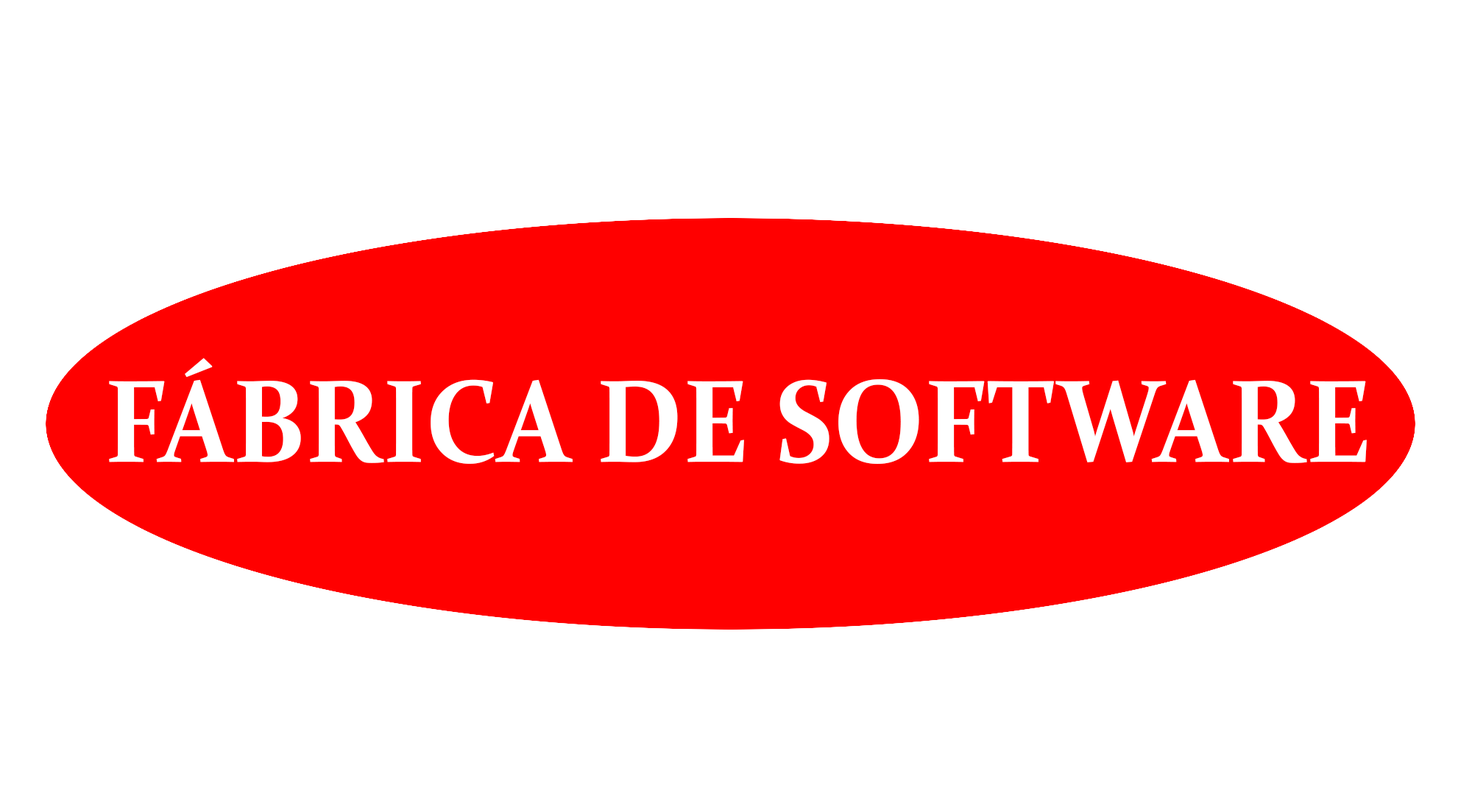
<style>
.page{position:relative;width:1472px;height:810px;background:#ffffff}
.page>*{position:absolute;margin:0}
.t1{font:117.7px "Constantia-Bold";color:#ffffff;scale:0.93 1}
</style>
<div class="page">
<p class="t1" style="left:109px;top:358px;width:1258px;height:106px">FÁBRICA DE SOFTWARE</p>
</div>
